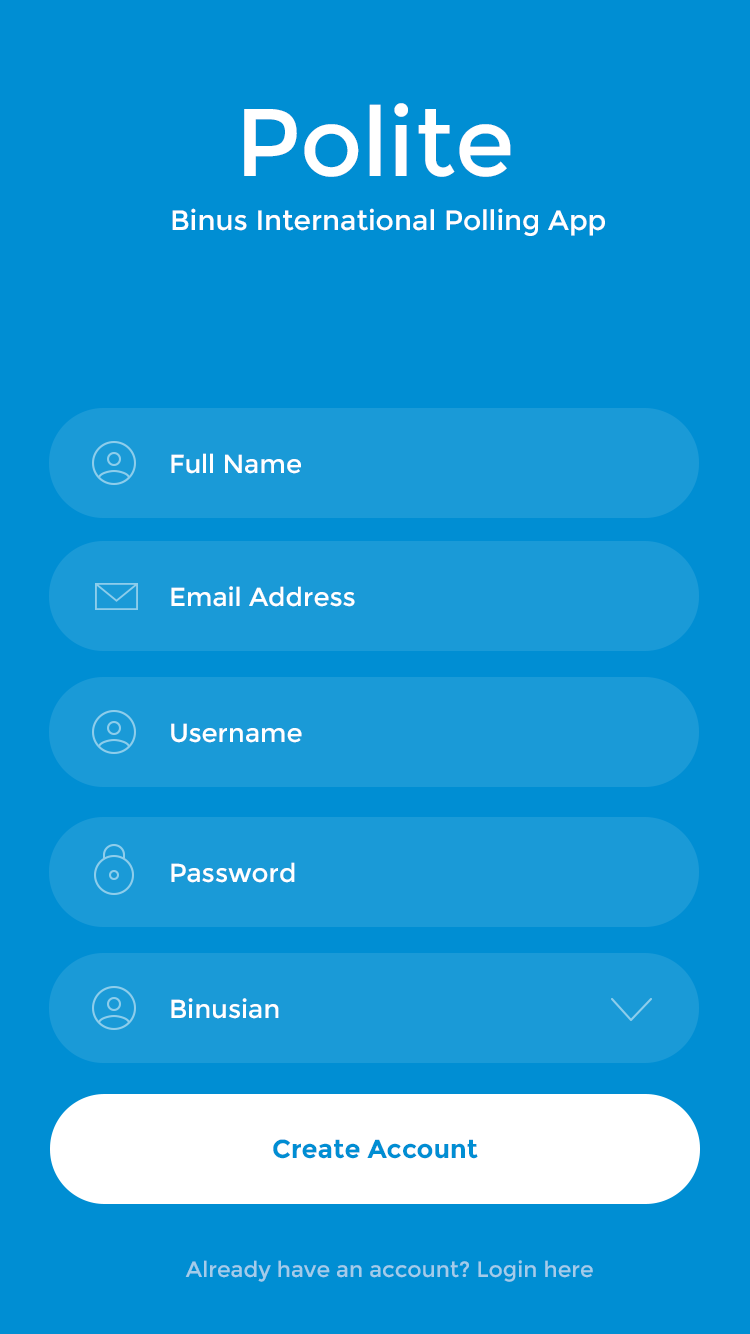
<style>
.page{position:relative;width:750px;height:1334px;background:#008ed3}
.page>*{position:absolute;margin:0}
.t1{font:96px "Montserrat-Regular";color:#ffffff}
.t2{font:28px "Montserrat-Regular";color:#ffffff}
.t3{font:26px "Montserrat-Regular";color:#ffffff}
.t4{font:26px "Montserrat-Bold";color:#008ed3}
.t5{font:22px "Montserrat-Regular";color:#a3ccea}
</style>
<div class="page">
<p class="t1" style="left:244px;top:103px;width:267px;height:74px">Polite</p>
<p class="t2" style="left:172px;top:208px;width:433px;height:28px">Binus International Polling App</p>
<p class="t3" style="left:171px;top:453px;width:130px;height:21px">Full Name</p>
<p class="t3" style="left:171px;top:586px;width:184px;height:21px">Email Address</p>
<p class="t3" style="left:171px;top:723px;width:131px;height:20px">Username</p>
<p class="t3" style="left:171px;top:862px;width:124px;height:21px">Password</p>
<p class="t3" style="left:171px;top:998px;width:108px;height:21px">Binusian</p>
<p class="t4" style="left:273px;top:1139px;width:205px;height:20px">Create Account</p>
<p class="t5" style="left:185px;top:1260px;width:408px;height:22px">Already have an account? Login here</p>
</div>
